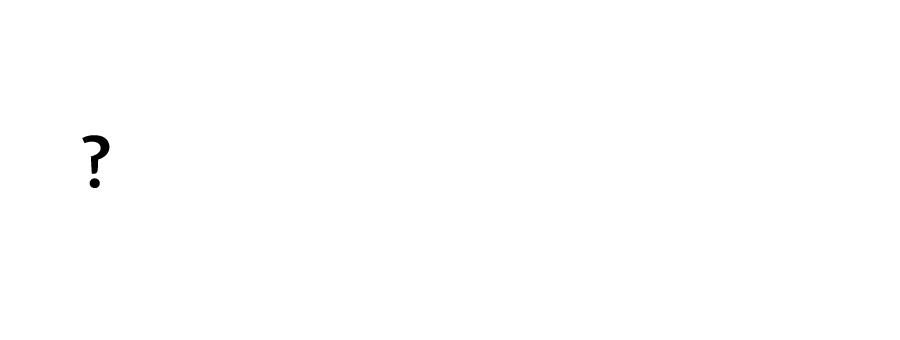
<style>
.page{position:relative;width:900px;height:340px;background:#ffffff}
.page>*{position:absolute;margin:0}
.t1{font:70px "12LotteMartDreamBold";color:#000000}
</style>
<div class="page">
<p class="t1" style="left:82px;top:135px;width:28px;height:53px">?</p>
</div>
